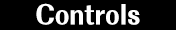
<style>
.page{position:relative;width:176px;height:30px;background:#000000}
.page>*{position:absolute;margin:0}
.t1{font:25.5px "FolkPro-Heavy";color:#ffffff;scale:0.92 1}
</style>
<div class="page">
<p class="t1" style="left:36px;top:3px;width:104px;height:22px">Controls</p>
</div>
